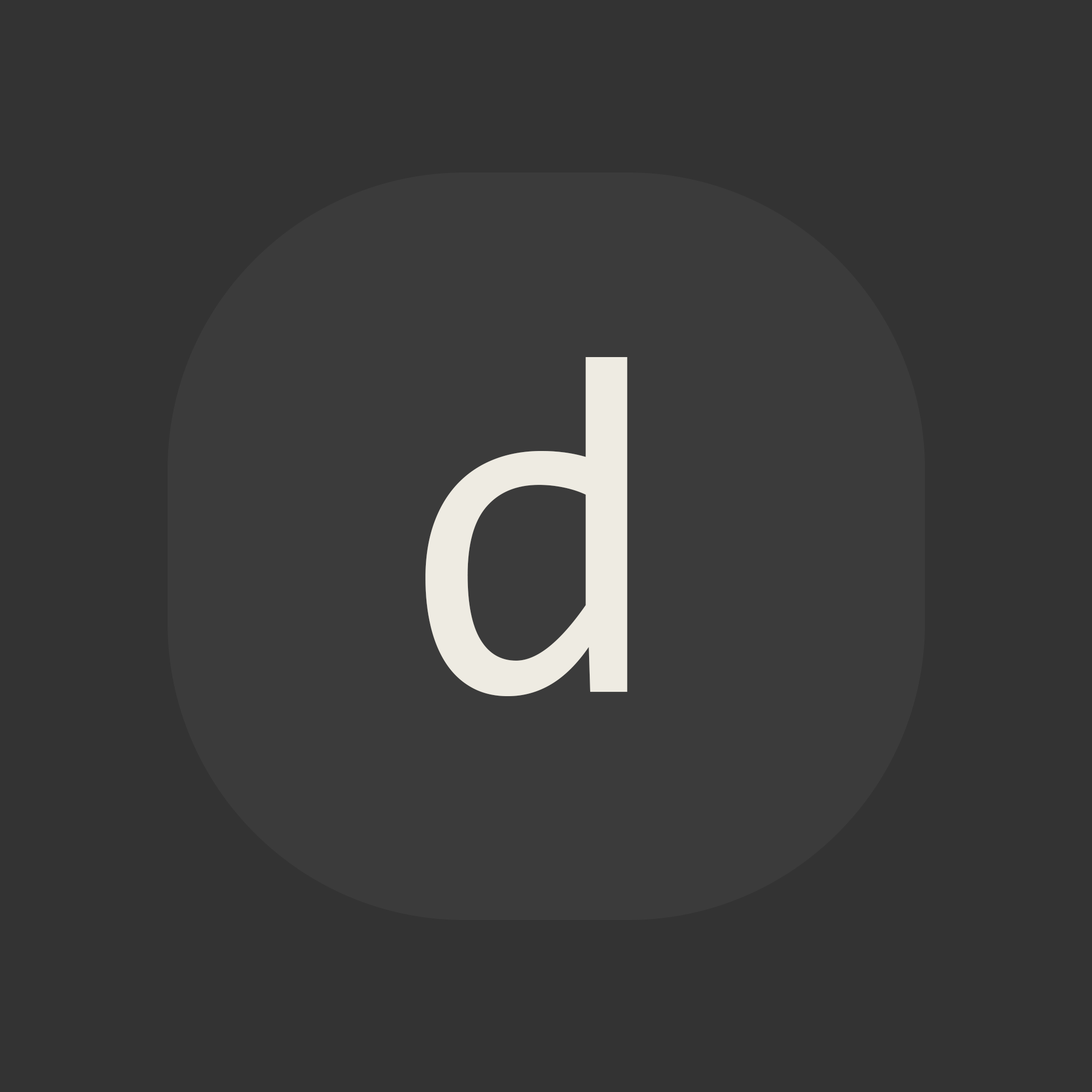
<style>
.page{position:relative;width:1092px;height:1092px;background:#333333}
.page>*{position:absolute;margin:0}
.t1{font:485px "Consolas";color:#eeebe2}
</style>
<div class="page">
<p class="t1" style="left:425px;top:357px;width:202px;height:339px">d</p>
</div>
